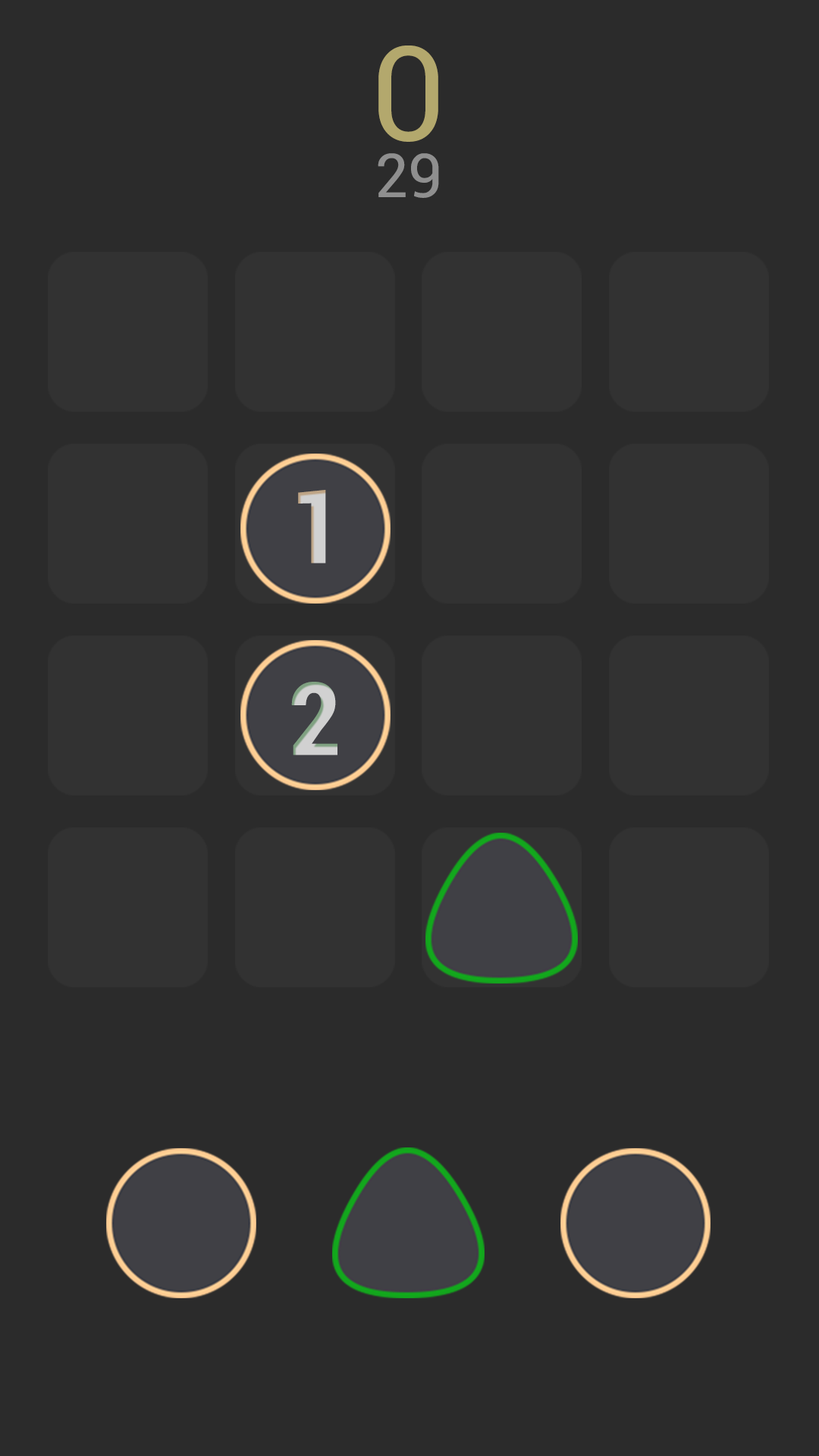
<style>
.page{position:relative;width:819px;height:1456px;background:#2b2b2b}
.page>*{position:absolute;margin:0}
.t1{font:131.4px "Roboto-Regular";color:#b3a86d}
.t2{font:60.7px "Roboto-Regular";color:#8f8f8f}
.t3{font:101.1px "Roboto-BoldCondensed";color:#d1d1d1}
</style>
<div class="page">
<p class="t1" style="left:378px;top:45px;width:60px;height:97px">0</p>
<p class="t2" style="left:378px;top:153px;width:61px;height:45px">29</p>
<p class="t3" style="left:298px;top:490px;width:28px;height:73px">1</p>
<p class="t3" style="left:291px;top:682px;width:46px;height:73px">2</p>
</div>
